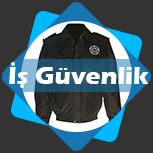
<style>
.page{position:relative;width:153px;height:153px;background:#333333}
.page>*{position:absolute;margin:0}
.t1{font:25px "ErasITC-Bold";color:#ffffff}
</style>
<div class="page">
<p class="t1" style="left:9px;top:67px;width:140px;height:17px">Is Güvenlik</p>
</div>
